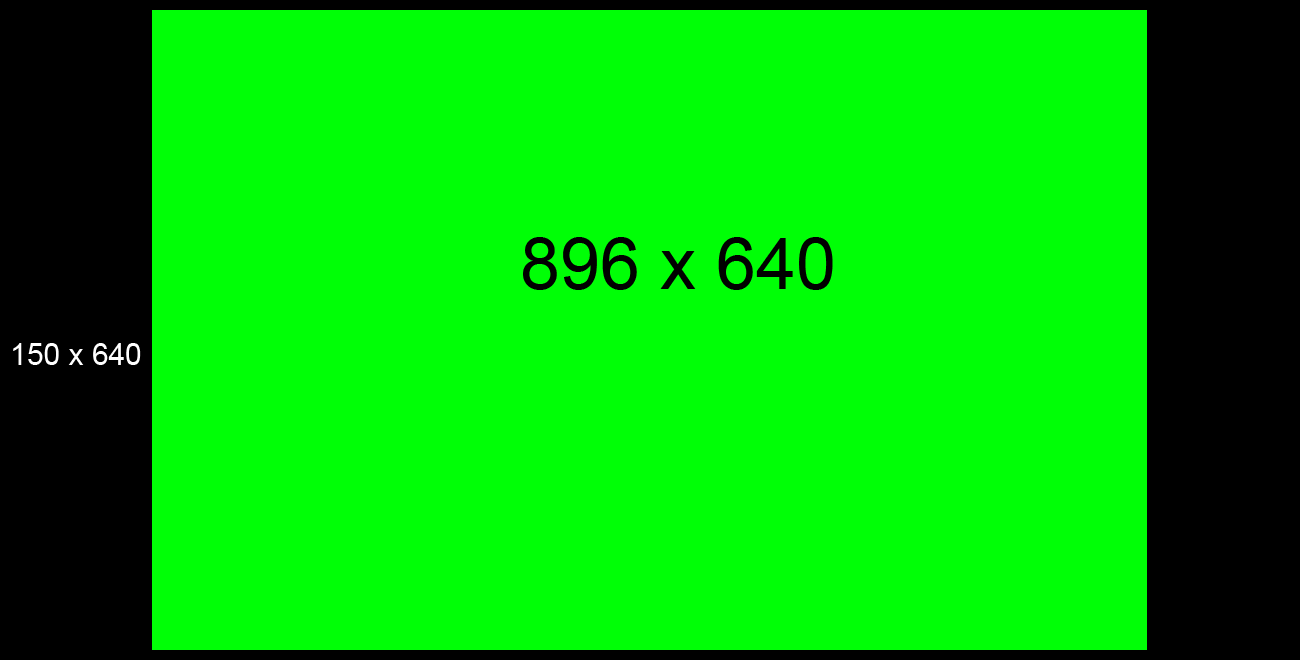
<style>
.page{position:relative;width:1300px;height:660px;background:#00ff06}
.page>*{position:absolute;margin:0}
.t1{font:72px "ArialMT";color:#000000}
.t2{font:30px "ArialMT";color:#ffffff}
</style>
<div class="page">
<p class="t1" style="left:523px;top:237px;width:310px;height:53px">896 x 640</p>
<p class="t2" style="left:13px;top:343px;width:128px;height:22px">150 x 640</p>
</div>
